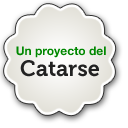
<style>
.page{position:relative;width:128px;height:128px;background:#ffffff}
.page>*{position:absolute;margin:0}
.t1{font:12px "HelveticaNeue-Bold";color:#008800}
.t2{font:22px "Museo-700";color:#222222}
</style>
<div class="page">
<p class="t1" style="left:16px;top:46px;width:90px;height:12px">Un proyecto del</p>
<p class="t2" style="left:20px;top:60px;width:79px;height:17px">Catarse</p>
</div>
